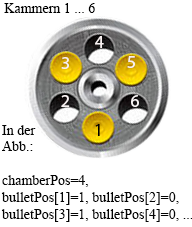
<style>
.page{position:relative;width:192px;height:227px;background:#ffffff}
.page>*{position:absolute;margin:0}
.t1{font:14px "TimesNewRomanPSMT";color:#000000}
.t2{font:18px "MyriadPro-Regular";color:#f8f1f1}
.t3{font:18px "MyriadPro-Regular";color:#f9f5f5}
.t4{font:14px "TimesNewRomanPSMT";color:#030303}
.t5{font:18px "MyriadPro-Regular";color:#000000}
</style>
<div class="page">
<p class="t1" style="left:4px;top:3px;width:91px;height:10px">Kammern 1 ... 6</p>
<p class="t2" style="left:95px;top:36px;width:9px;height:12px">4</p>
<p class="t2" style="left:61px;top:57px;width:8px;height:12px">3</p>
<p class="t2" style="left:127px;top:56px;width:8px;height:12px">5</p>
<p class="t2" style="left:61px;top:95px;width:9px;height:12px">2</p>
<p class="t3" style="left:131px;top:95px;width:8px;height:12px">6</p>
<p class="t4" style="left:1px;top:125px;width:192px;height:97px">In der <br>Abb.:<br><br>chamberPos=4, <br>bulletPos[1]=1, bulletPos[2]=0,<br>bulletPos[3]=1, bulletPos[4]=0, ...</p>
<p class="t5" style="left:95px;top:124px;width:5px;height:12px">1</p>
</div>
